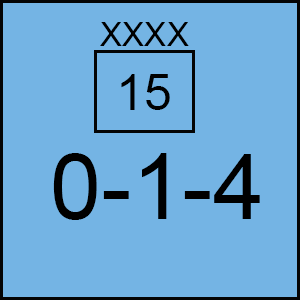
<style>
.page{position:relative;width:300px;height:300px;background:#74b4e4}
.page>*{position:absolute;margin:0}
.t1{font:33.3px "ArialMT";color:#000000}
.t2{font:50px "ArialMT";color:#000000}
.t3{font:91.7px "ArialMT";color:#000000}
</style>
<div class="page">
<p class="t1" style="left:100px;top:22px;width:89px;height:24px">XXXX</p>
<p class="t2" style="left:121px;top:74px;width:49px;height:36px">15</p>
<p class="t3" style="left:53px;top:153px;width:207px;height:67px">0-1-4</p>
</div>
